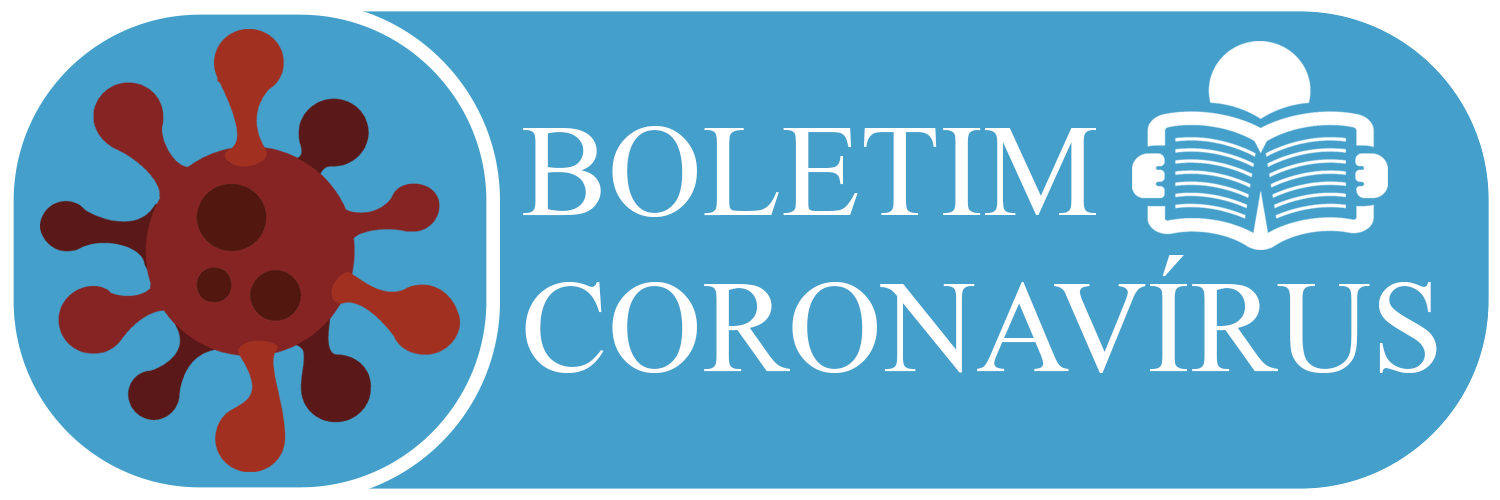
<style>
.page{position:relative;width:1500px;height:500px;background:#44a0cb}
.page>*{position:absolute;margin:0}
.t1{font:130px "IskoolaPota";color:#ffffff}
</style>
<div class="page">
<p class="t1" style="left:523px;top:126px;width:914px;height:247px">BOLETIM<br>CORONAVÍRUS</p>
</div>
